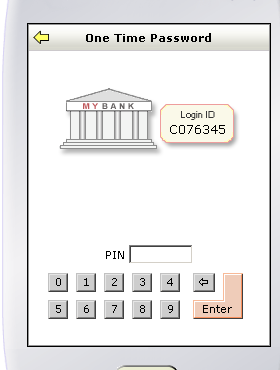
<style>
.page{position:relative;width:280px;height:370px;background:#ffffff}
.page>*{position:absolute;margin:0}
.t1{font:11px "Verdana";color:#000000}
</style>
<div class="page">
<p class="t1" style="left:56px;top:278px;width:5px;height:8px">0</p>
<p class="t1" style="left:84px;top:278px;width:5px;height:8px">1</p>
<p class="t1" style="left:112px;top:278px;width:5px;height:8px">2</p>
<p class="t1" style="left:140px;top:278px;width:5px;height:8px">3</p>
<p class="t1" style="left:167px;top:278px;width:6px;height:8px">4</p>
<p class="t1" style="left:56px;top:305px;width:5px;height:8px">5</p>
<p class="t1" style="left:84px;top:305px;width:5px;height:8px">6</p>
<p class="t1" style="left:112px;top:305px;width:5px;height:8px">7</p>
<p class="t1" style="left:140px;top:305px;width:5px;height:8px">8</p>
<p class="t1" style="left:168px;top:305px;width:5px;height:8px">9</p>
<p class="t1" style="left:203px;top:305px;width:29px;height:8px">Enter</p>
</div>
